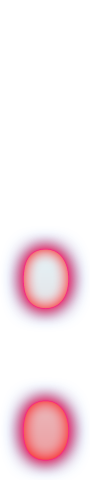
<style>
.page{position:relative;width:90px;height:480px;background:#ffffff}
.page>*{position:absolute;margin:0}
.t1{font:481.8px "Clockopia";letter-spacing:0.025em;scale:0.76 1}
</style>
<div class="page">
<p class="t1" style="left:23px;top:249px;width:46px;height:211px">:</p>
<p class="t1" style="left:23px;top:249px;width:46px;height:211px">:</p>
</div>
